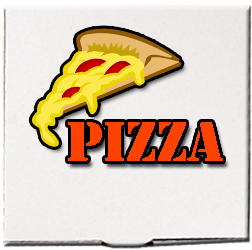
<style>
.page{position:relative;width:252px;height:250px}
.page>*{position:absolute;margin:0}
.t1{font:58.3px "Stencil";color:#ff4200}
</style>
<div class="page">
<p class="t1" style="left:68px;top:122px;width:155px;height:39px">Pizza</p>
</div>
